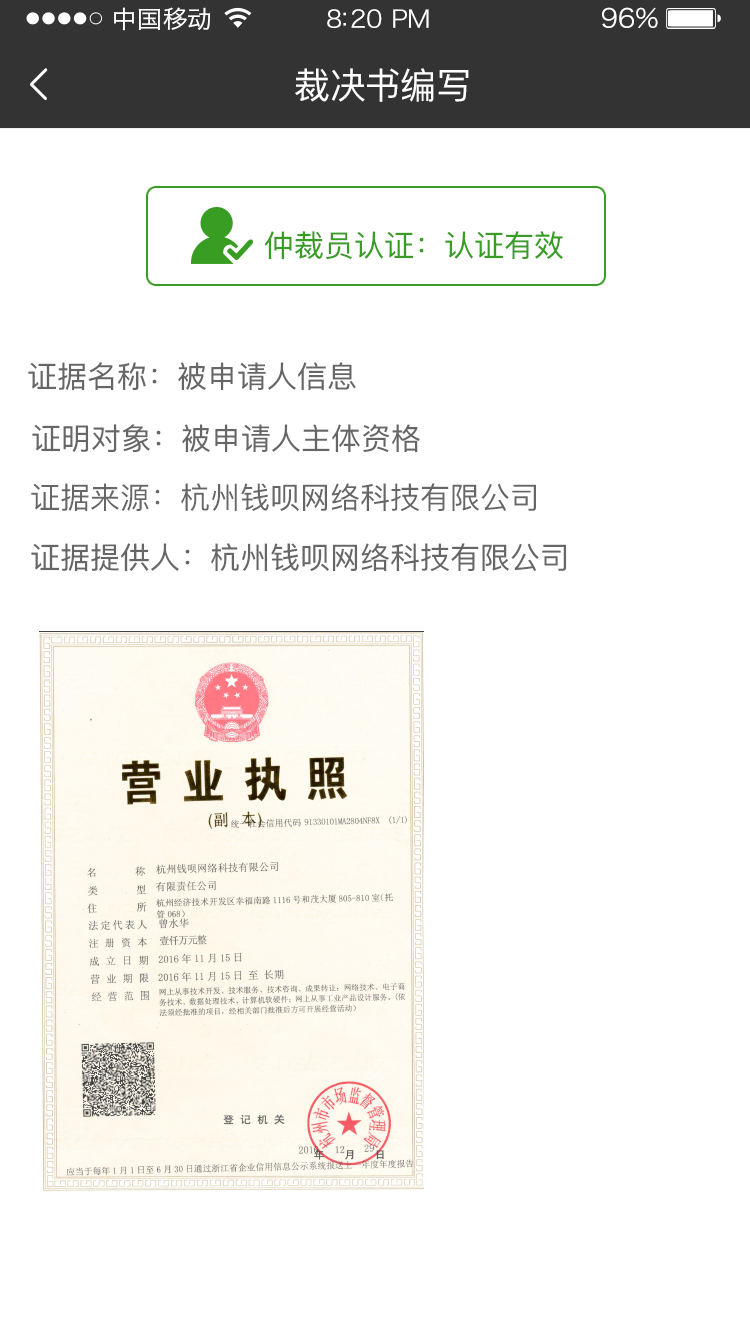
<style>
.page{position:relative;width:750px;height:1334px;background:#ffffff}
.page>*{position:absolute;margin:0}
.t1{font:24px "HiraginoSansGB-W3";letter-spacing:0.02em;color:#ffffff;scale:1.03 1}
.t2{font:24px "HiraginoSansGB-W3";letter-spacing:-0.02em;color:#ffffff;scale:1.03 1}
.t3{font:26.2px "HiraginoSansGB-W3";letter-spacing:-0.02em;color:#ffffff;scale:1.03 1}
.t4{font:36px "PingFangSC-Regular";letter-spacing:-0.02em;color:#ffffff}
.t5{font:30px "PingFangSC-Regular";color:#379e23}
.t6{font:30px "PingFangSC-Regular";color:#666666}
</style>
<div class="page">
<p class="t1" style="left:114px;top:7px;width:97px;height:24px">中国移动</p>
<p class="t2" style="left:327px;top:9px;width:102px;height:19px">8:20 PM</p>
<p class="t3" style="left:602px;top:7px;width:56px;height:22px">96%</p>
<p class="t4" style="left:295px;top:68px;width:174px;height:34px">裁决书编写</p>
<p class="t5" style="left:264px;top:231px;width:299px;height:29px">仲裁员认证：认证有效</p>
<p class="t6" style="left:28px;top:362px;width:328px;height:29px">证据名称：被申请人信息</p>
<p class="t6" style="left:32px;top:424px;width:388px;height:29px">证明对象：被申请人主体资格</p>
<p class="t6" style="left:31px;top:483px;width:505px;height:28px">证据来源：杭州钱呗网络科技有限公司</p>
<p class="t6" style="left:31px;top:543px;width:536px;height:29px">证据提供人：杭州钱呗网络科技有限公司</p>
</div>
